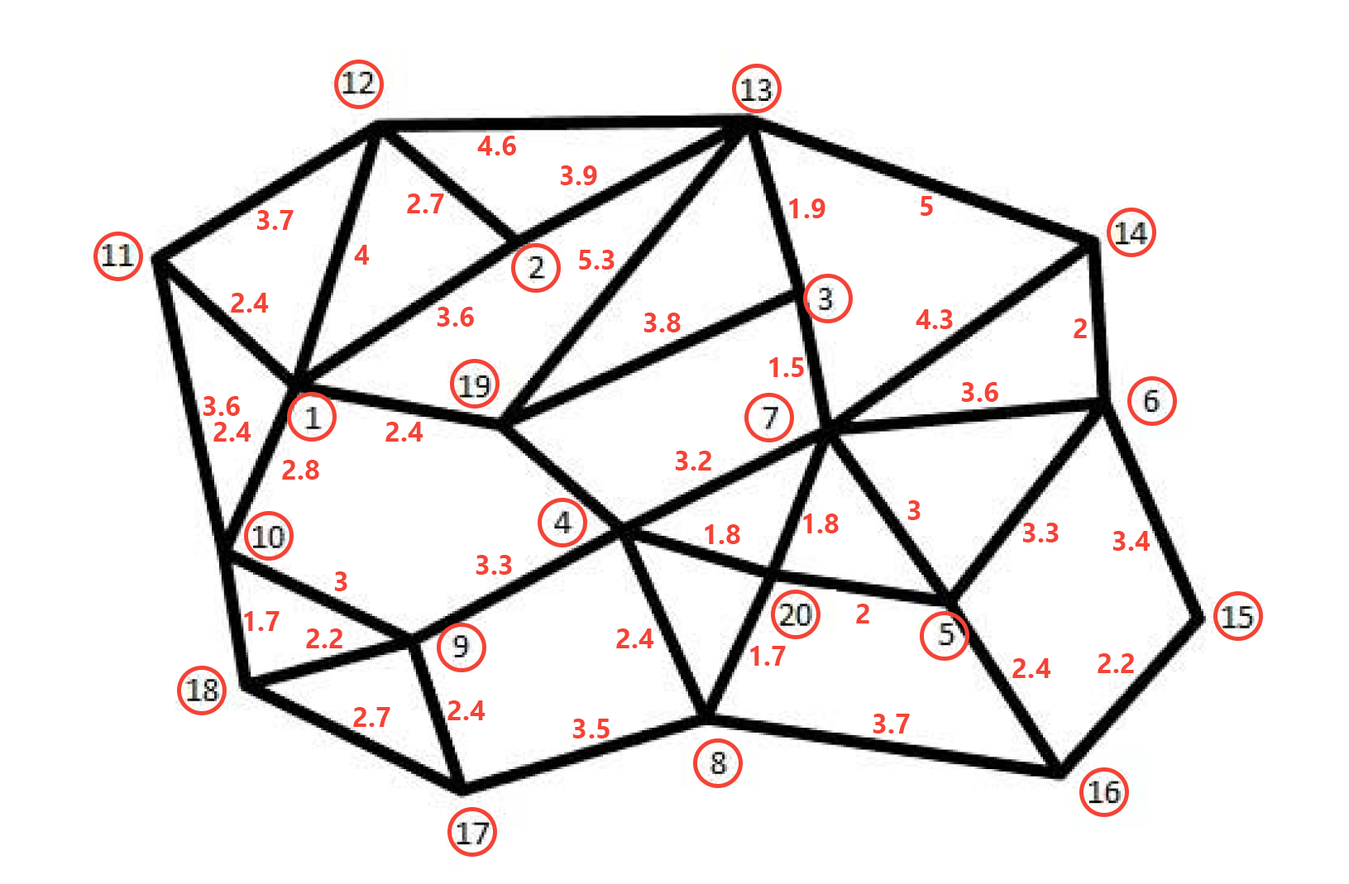
<style>
.page{position:relative;width:1349px;height:884px;background:#ffffff}
.page>*{position:absolute;margin:0}
.t1{font:27.6px "SegoeUI-Bold";color:#f44336}
</style>
<div class="page">
<p class="t1" style="left:477px;top:136px;width:39px;height:19px">4.6</p>
<p class="t1" style="left:560px;top:165px;width:37px;height:20px">3.9</p>
<p class="t1" style="left:407px;top:194px;width:37px;height:19px">2.7</p>
<p class="t1" style="left:920px;top:196px;width:13px;height:20px">5</p>
<p class="t1" style="left:789px;top:198px;width:36px;height:20px">1.9</p>
<p class="t1" style="left:256px;top:210px;width:38px;height:20px">3.7</p>
<p class="t1" style="left:354px;top:245px;width:16px;height:20px">4</p>
<p class="t1" style="left:579px;top:250px;width:35px;height:20px">5.3</p>
<p class="t1" style="left:231px;top:293px;width:38px;height:20px">2.4</p>
<p class="t1" style="left:437px;top:307px;width:37px;height:20px">3.6</p>
<p class="t1" style="left:643px;top:313px;width:38px;height:19px">3.8</p>
<p class="t1" style="left:915px;top:309px;width:38px;height:20px">4.3</p>
<p class="t1" style="left:1073px;top:318px;width:14px;height:20px">2</p>
<p class="t1" style="left:769px;top:357px;width:35px;height:20px">1.5</p>
<p class="t1" style="left:961px;top:382px;width:37px;height:20px">3.6</p>
<p class="t1" style="left:203px;top:396px;width:37px;height:20px">3.6</p>
<p class="t1" style="left:213px;top:422px;width:38px;height:20px">2.4</p>
<p class="t1" style="left:385px;top:422px;width:38px;height:20px">2.4</p>
<p class="t1" style="left:282px;top:460px;width:37px;height:20px">2.8</p>
<p class="t1" style="left:675px;top:451px;width:36px;height:20px">3.2</p>
<p class="t1" style="left:907px;top:500px;width:13px;height:20px">3</p>
<p class="t1" style="left:803px;top:514px;width:36px;height:19px">1.8</p>
<p class="t1" style="left:705px;top:524px;width:35px;height:20px">1.8</p>
<p class="t1" style="left:1022px;top:523px;width:37px;height:20px">3.3</p>
<p class="t1" style="left:1112px;top:531px;width:38px;height:20px">3.4</p>
<p class="t1" style="left:476px;top:555px;width:36px;height:20px">3.3</p>
<p class="t1" style="left:334px;top:571px;width:13px;height:20px">3</p>
<p class="t1" style="left:856px;top:604px;width:13px;height:20px">2</p>
<p class="t1" style="left:244px;top:611px;width:36px;height:20px">1.7</p>
<p class="t1" style="left:306px;top:629px;width:36px;height:19px">2.2</p>
<p class="t1" style="left:616px;top:629px;width:38px;height:19px">2.4</p>
<p class="t1" style="left:750px;top:646px;width:36px;height:20px">1.7</p>
<p class="t1" style="left:1097px;top:653px;width:37px;height:20px">2.2</p>
<p class="t1" style="left:1012px;top:658px;width:39px;height:20px">2.4</p>
<p class="t1" style="left:447px;top:700px;width:38px;height:20px">2.4</p>
<p class="t1" style="left:353px;top:707px;width:37px;height:20px">2.7</p>
<p class="t1" style="left:872px;top:714px;width:38px;height:20px">3.7</p>
<p class="t1" style="left:572px;top:719px;width:37px;height:20px">3.5</p>
</div>
